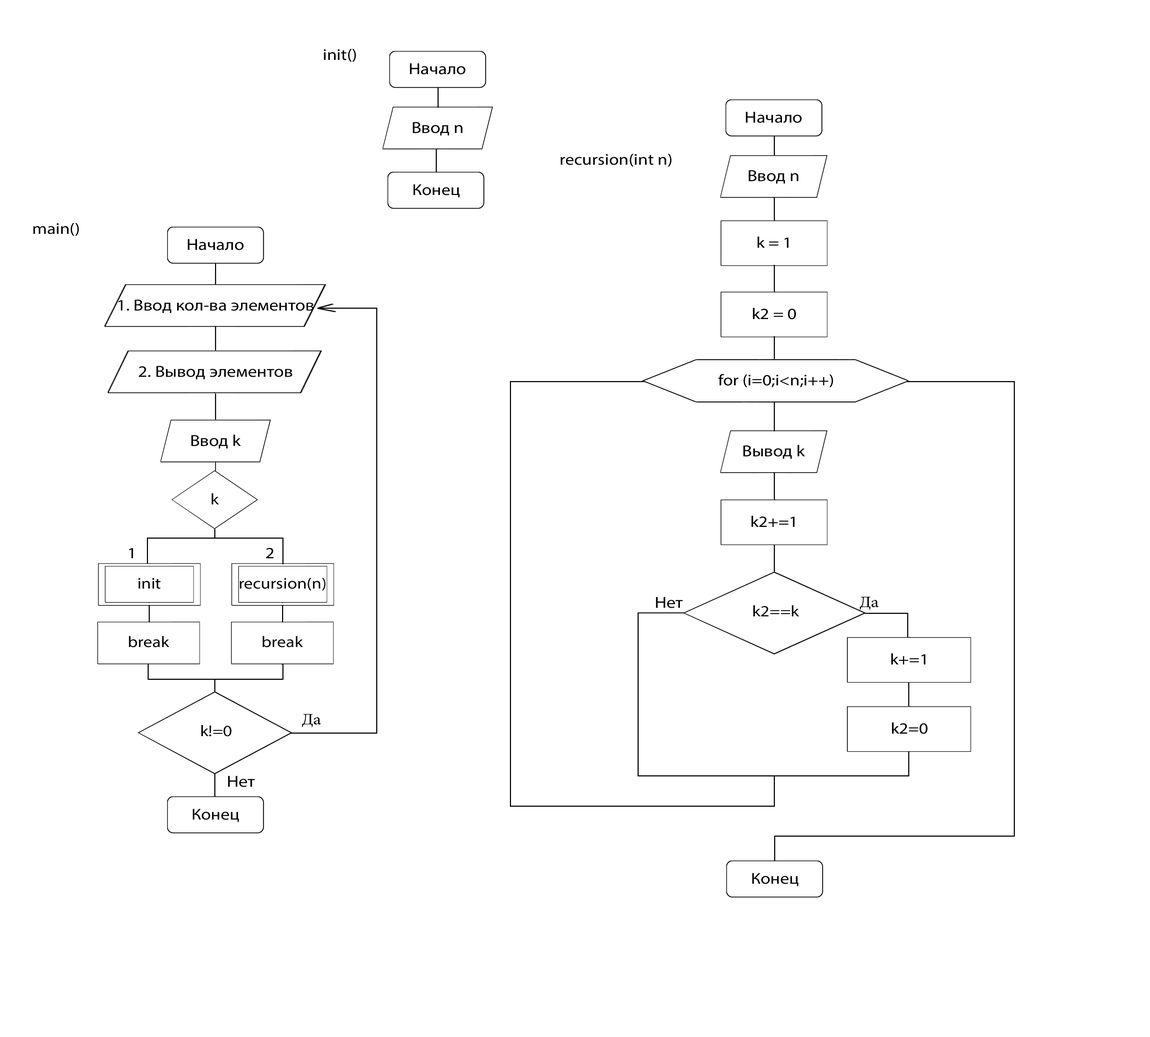
<style>
.page{position:relative;width:1150px;height:1037px;background:#ffffff}
.page>*{position:absolute;margin:0}
.t1{font:15.7px "MyriadPro-Regular";color:#000000;scale:1.14 1}
.t2{font:16px "MyriadPro-Regular";color:#000000;scale:1.14 1}
.t3{font:15.5px "MyriadPro-Regular";color:#000000;scale:1.14 1}
.t4{font:16px "MyriadPro-Regular";color:#000000;scale:1.13 1}
</style>
<div class="page">
<p class="t1" style="left:324px;top:49px;width:32px;height:13px">init()</p>
<p class="t2" style="left:410px;top:63px;width:55px;height:12px">Начало</p>
<p class="t2" style="left:745px;top:112px;width:56px;height:11px">Начало</p>
<p class="t2" style="left:412px;top:122px;width:50px;height:13px">Ввод n</p>
<p class="t1" style="left:560px;top:154px;width:111px;height:13px">recursion(int n)</p>
<p class="t2" style="left:748px;top:170px;width:50px;height:14px">Ввод n</p>
<p class="t1" style="left:413px;top:184px;width:47px;height:14px">Конец</p>
<p class="t1" style="left:33px;top:223px;width:46px;height:13px">main()</p>
<p class="t2" style="left:188px;top:239px;width:56px;height:11px">Начало</p>
<p class="t1" style="left:757px;top:236px;width:31px;height:12px">k = 1</p>
<p class="t2" style="left:118px;top:299px;width:196px;height:14px">1. Ввод кол-ва элементов</p>
<p class="t1" style="left:753px;top:308px;width:43px;height:11px">k2 = 0</p>
<p class="t2" style="left:139px;top:366px;width:153px;height:13px">2. Вывод элементов</p>
<p class="t1" style="left:718px;top:374px;width:115px;height:14px">for (i=0;i&lt;n;i++)</p>
<p class="t2" style="left:191px;top:435px;width:50px;height:13px">Ввод k</p>
<p class="t2" style="left:743px;top:445px;width:62px;height:14px">Вывод k</p>
<p class="t1" style="left:211px;top:493px;width:8px;height:11px">k</p>
<p class="t1" style="left:751px;top:516px;width:43px;height:11px">k2+=1</p>
<p class="t1" style="left:129px;top:548px;width:4px;height:10px">1</p>
<p class="t1" style="left:266px;top:548px;width:7px;height:10px">2</p>
<p class="t3" style="left:138px;top:578px;width:22px;height:11px">init</p>
<p class="t3" style="left:240px;top:578px;width:85px;height:13px">recursion(n)</p>
<p class="t4" style="left:656px;top:597px;width:27px;height:11px">Нет</p>
<p class="t1" style="left:753px;top:605px;width:46px;height:11px">k2==k</p>
<p class="t3" style="left:129px;top:636px;width:40px;height:11px">break</p>
<p class="t3" style="left:262px;top:636px;width:41px;height:11px">break</p>
<p class="t1" style="left:891px;top:653px;width:34px;height:12px">k+=1</p>
<p class="t1" style="left:201px;top:725px;width:30px;height:12px">k!=0</p>
<p class="t1" style="left:892px;top:722px;width:35px;height:12px">k2=0</p>
<p class="t4" style="left:228px;top:776px;width:27px;height:11px">Нет</p>
<p class="t1" style="left:193px;top:809px;width:46px;height:13px">Конец</p>
<p class="t1" style="left:752px;top:873px;width:46px;height:13px">Конец</p>
</div>
